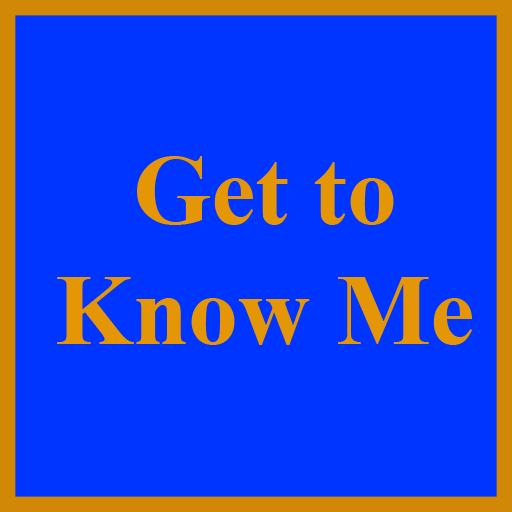
<style>
.page{position:relative;width:512px;height:512px;background:#0034ff}
.page>*{position:absolute;margin:0}
.t1{font:100px "TimesNewRomanPS-BoldMT";color:#dda608}
</style>
<div class="page">
<p class="t1" style="left:57px;top:156px;width:415px;height:189px;text-align:center">Get to<br>Know Me</p>
</div>
